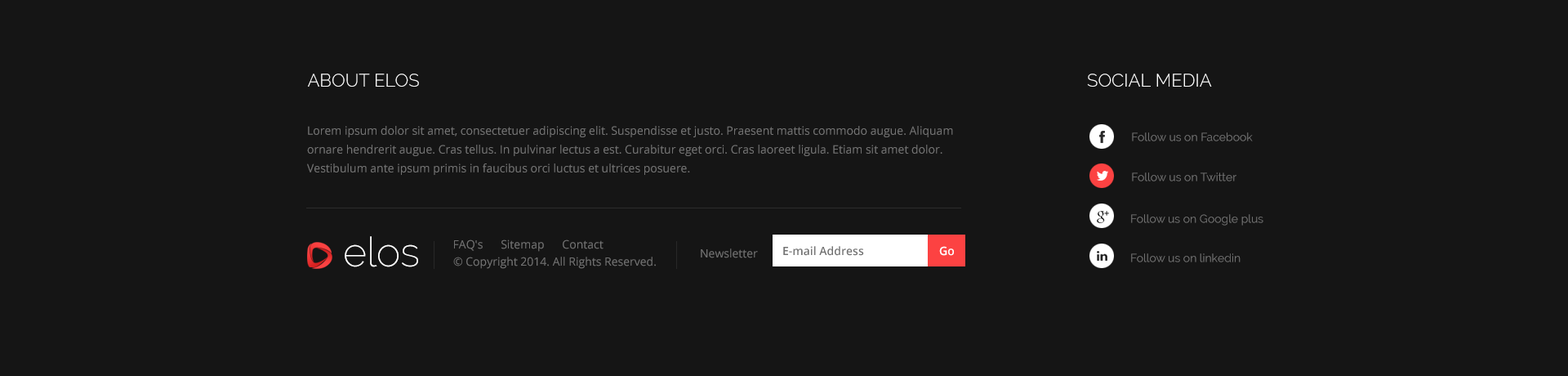
<style>
.page{position:relative;width:1568px;height:376px;background:#151515}
.page>*{position:absolute;margin:0}
.t1{font:18px "Raleway-Light";color:#ffffff;text-transform:uppercase}
.t2{font:11.4px/18.8px "OpenSans";color:#727272}
.t3{font:11.4px "Raleway";color:#727272}
.t4{font:40.8px "Raleway-ExtraLight";color:#ffffff}
.t5{font:11.4px "OpenSans";color:#727272}
.t6{font:11.4px "OpenSans-Semibold";color:#727272}
.t7{font:11.4px "OpenSans-Semibold";color:#ffffff}
</style>
<div class="page">
<p class="t1" style="left:308px;top:74px;width:111px;height:13px">about elos</p>
<p class="t1" style="left:1087px;top:74px;width:125px;height:13px">Social media</p>
<p class="t2" style="left:307px;top:126px;width:646px;height:49px">Lorem ipsum dolor sit amet, consectetuer adipiscing elit. Suspendisse et justo. Praesent mattis commodo augue. Aliquam ornare hendrerit augue. Cras tellus. In pulvinar lectus a est. Curabitur eget orci. Cras laoreet ligula. Etiam sit amet dolor. Vestibulum ante ipsum primis in faucibus orci luctus et ultrices posuere.</p>
<p class="t3" style="left:1132px;top:132px;width:121px;height:9px">Follow us on Facebook</p>
<p class="t3" style="left:1132px;top:172px;width:104px;height:9px">Follow us on Twitter</p>
<p class="t3" style="left:1131px;top:214px;width:132px;height:11px">Follow us on Google plus</p>
<p class="t4" style="left:345px;top:236px;width:73px;height:31px">elos</p>
<p class="t5" style="left:454px;top:239px;width:150px;height:13px">FAQ's      Sitemap      Contact</p>
<p class="t6" style="left:783px;top:246px;width:81px;height:10px">E-mail Address</p>
<p class="t7" style="left:939px;top:246px;width:15px;height:10px">Go</p>
<p class="t5" style="left:453px;top:256px;width:203px;height:13px">© Copyright 2014. All Rights Reserved.</p>
<p class="t5" style="left:701px;top:248px;width:57px;height:10px">Newsletter</p>
<p class="t3" style="left:1131px;top:253px;width:110px;height:9px">Follow us on linkedin</p>
</div>
